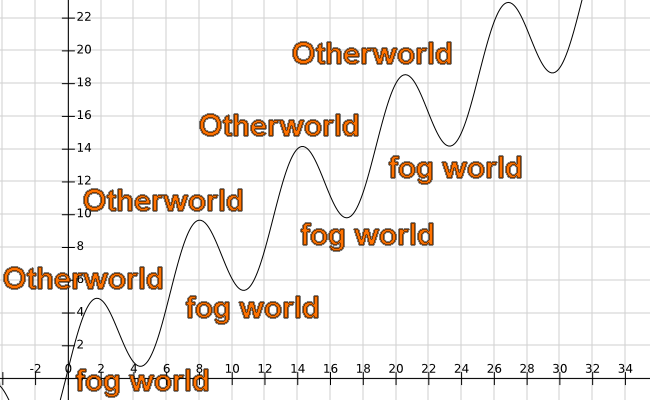
<style>
.page{position:relative;width:650px;height:400px;background:#ffffff}
.page>*{position:absolute;margin:0}
.t1{font:30px "Arial-BoldMT"}
</style>
<div class="page">
<p class="t1" style="left:293px;top:42px;width:158px;height:22px">Otherworld</p>
<p class="t1" style="left:200px;top:114px;width:158px;height:22px">Otherworld</p>
<p class="t1" style="left:389px;top:156px;width:132px;height:28px">fog world</p>
<p class="t1" style="left:84px;top:189px;width:158px;height:22px">Otherworld</p>
<p class="t1" style="left:301px;top:223px;width:132px;height:28px">fog world</p>
<p class="t1" style="left:4px;top:267px;width:158px;height:22px">Otherworld</p>
<p class="t1" style="left:186px;top:296px;width:132px;height:28px">fog world</p>
<p class="t1" style="left:76px;top:369px;width:132px;height:28px">fog world</p>
</div>
